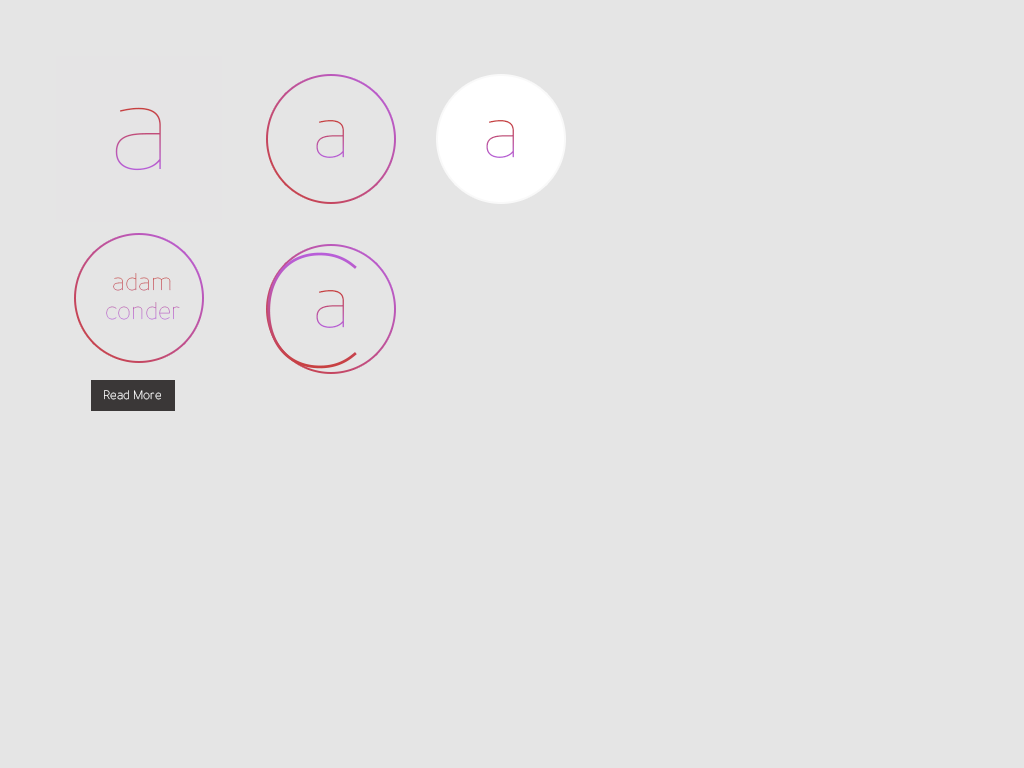
<style>
.page{position:relative;width:1024px;height:768px;background:#e5e5e5}
.page>*{position:absolute;margin:0}
.t1{font:120px "Uniman-UltraLight"}
.t2{font:72px "Uniman-UltraLight"}
.t3{font:24px "Uniman-UltraLight"}
.t4{font:12px "Uniman-UltraLight";color:#ffffff}
</style>
<div class="page">
<p class="t1" style="left:115px;top:107px;width:46px;height:64px">a</p>
<p class="t2" style="left:316px;top:120px;width:28px;height:38px">a</p>
<p class="t2" style="left:486px;top:120px;width:28px;height:38px">a</p>
<p class="t3" style="left:106px;top:273px;width:74px;height:47px;text-align:center">adam<br>conder</p>
<p class="t2" style="left:316px;top:290px;width:28px;height:38px">a</p>
<p class="t4" style="left:104px;top:390px;width:57px;height:10px">Read More</p>
</div>
